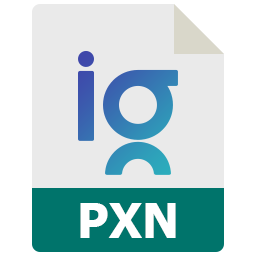
<style>
.page{position:relative;width:256px;height:256px;background:#eaeaea}
.page>*{position:absolute;margin:0}
.t1{font:48px "Tahoma-Bold";color:#ffffff}
</style>
<div class="page">
<p class="t1" style="left:80px;top:203px;width:96px;height:35px">PXN</p>
</div>
